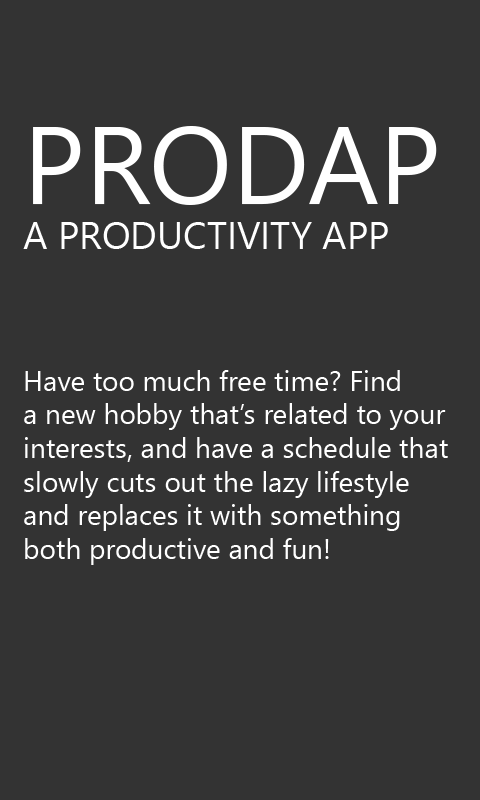
<style>
.page{position:relative;width:480px;height:800px;background:#333333}
.page>*{position:absolute;margin:0}
.t1{font:28px "SegoeUIHistoric";color:#ffffff}
.t2{font:110px "SegoeUIHistoric";color:#ffffff}
.t3{font:38px "SegoeUIHistoric";color:#ffffff}
</style>
<div class="page">
<p class="t1" style="left:23px;top:126px;width:425px;height:439px"><span class="t2">PRODAP<br></span><span class="t3">A PRODUCTIVITY APP<br><br><br><br></span>Have too much free time? Find <br>a new hobby that’s related to your <br>interests, and have a schedule that <br>slowly cuts out the lazy lifestyle <br>and replaces it with something <br>both productive and fun!</p>
</div>
